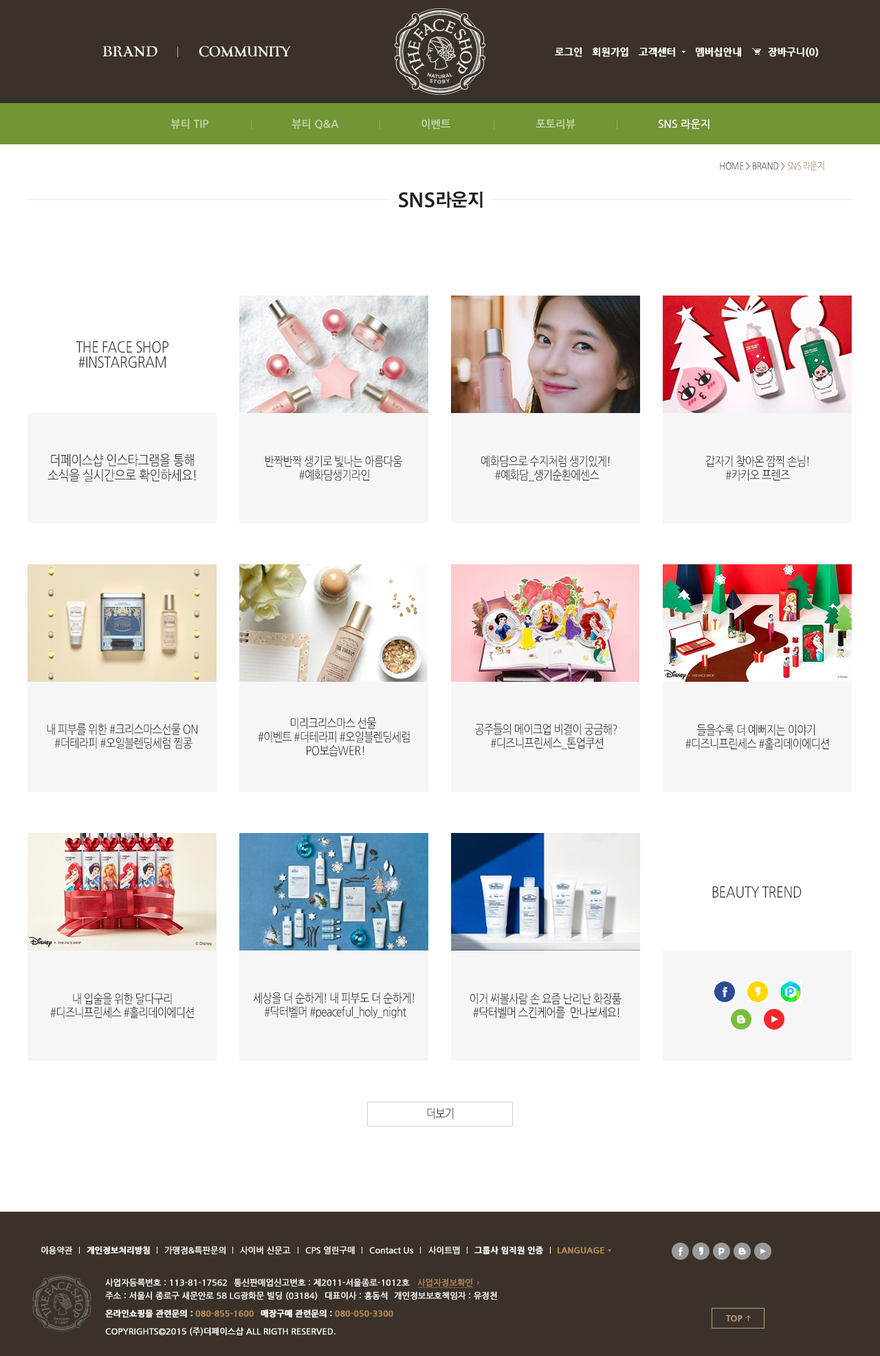
<style>
.page{position:relative;width:880px;height:1356px;background:#ffffff}
.page>*{position:absolute;margin:0}
.t1{font:9.6px "NanumGothicBold";color:#ffffff;font-weight:bold}
.t2{font:10.3px "NanumGothic";color:#cddbb1;font-weight:bold}
.t3{font:10.3px "NanumGothic";color:#ffffff;font-weight:bold}
.t4{font:9.6px "NanumGothic";letter-spacing:-0.03em;color:#333333;scale:0.85 1}
.t5{font:9.6px "NanumGothic";letter-spacing:-0.03em;color:#b68957;scale:0.85 1}
.t6{font:15.1px/15.1px "NanumGothic";letter-spacing:-0.03em;color:#333333;scale:0.85 1}
.t7{font:13.7px/15.1px "NanumGothic";letter-spacing:-0.03em;color:#333333;scale:0.85 1}
.t8{font:12.4px/13.7px "NanumGothic";letter-spacing:-0.03em;color:#333333;scale:0.85 1}
.t9{font:15.1px "NanumGothic";letter-spacing:-0.03em;color:#333333;scale:0.85 1}
.t10{font:12.4px "NanumGothic";letter-spacing:-0.03em;color:#333333;scale:0.85 1}
.t11{font:8.2px "NanumGothic";color:#ffffff;font-weight:bold}
.t12{font:8.2px "NanumGothicBold";color:#ffffff;font-weight:bold}
.t13{font:8.2px "NanumGothicBold";color:#b68957;font-weight:bold}
.t14{font:8.2px "NanumGothic";color:#b68957;font-weight:bold;text-decoration:underline}
</style>
<div class="page">
<p class="t1" style="left:555px;top:47px;width:27px;height:10px">로그인</p>
<p class="t1" style="left:592px;top:47px;width:36px;height:10px">회원가입</p>
<p class="t1" style="left:638px;top:47px;width:37px;height:10px">고객센터</p>
<p class="t1" style="left:695px;top:47px;width:46px;height:10px">멤버십안내</p>
<p class="t1" style="left:768px;top:47px;width:50px;height:10px">장바구니(0)</p>
<p class="t2" style="left:170px;top:119px;width:38px;height:10px">뷰티 TIP</p>
<p class="t2" style="left:291px;top:119px;width:48px;height:10px">뷰티 Q&amp;A</p>
<p class="t2" style="left:421px;top:119px;width:30px;height:10px">이벤트</p>
<p class="t2" style="left:535px;top:119px;width:40px;height:10px">포토리뷰</p>
<p class="t3" style="left:658px;top:119px;width:51px;height:10px">SNS 라운지</p>
<p class="t4" style="left:719px;top:161px;width:105px;height:9px">HOME &gt; BRAND &gt; <span class="t5">SNS 라운지</span></p>
<p class="t6" style="left:76px;top:341px;width:92px;height:27px;text-align:center">THE FACE SHOP<br>#INSTARGRAM</p>
<p class="t7" style="left:47px;top:454px;width:149px;height:28px;text-align:center">더페이스샵 인스타그램을 통해<br>소식을 실시간으로 확인하세요!</p>
<p class="t8" style="left:265px;top:456px;width:137px;height:25px;text-align:center">반짝반짝 생기로 빛나는 아름다움 <br>#예화담생기라인</p>
<p class="t8" style="left:481px;top:456px;width:128px;height:26px;text-align:center">예화담으로 수지처럼 생기있게!<br> #예화담_생기순환에센스</p>
<p class="t8" style="left:706px;top:456px;width:102px;height:25px;text-align:center">갑자기 찾아온 깜찍 손님!<br>#카카오 프렌즈</p>
<p class="t8" style="left:47px;top:723px;width:150px;height:26px;text-align:center">내 피부를 위한 #크리스마스선물 ON<br> #더테라피 #오일블렌딩세럼 찜콩</p>
<p class="t8" style="left:258px;top:717px;width:152px;height:40px;text-align:center">미리크리스마스 선물 <br>#이벤트 #더테라피 #오일블렌딩세럼<br> PO보습WER!</p>
<p class="t8" style="left:474px;top:724px;width:143px;height:26px;text-align:center">공주들의 메이크업 비결이 궁금해? <br>#디즈니프린세스_톤업쿠션</p>
<p class="t8" style="left:685px;top:724px;width:144px;height:26px;text-align:center">들을수록 더 예뻐지는 이야기<br> #디즈니프린세스 #홀리데이에디션</p>
<p class="t9" style="left:712px;top:886px;width:89px;height:12px">BEAUTY TREND</p>
<p class="t8" style="left:50px;top:992px;width:144px;height:26px;text-align:center">내 입술을 위한 달다구리<br>#디즈니프린세스 #홀리데이에디션</p>
<p class="t8" style="left:253px;top:992px;width:161px;height:26px;text-align:center">세상을 더 순하게! 내 피부도 더 순하게!<br> #닥터벨머 #peaceful_holy_night</p>
<p class="t8" style="left:470px;top:992px;width:151px;height:26px;text-align:center">이거 써볼사람 손 요즘 난리난 화장품 <br>#닥터벨머 스킨케어를  만나보세요!</p>
<p class="t10" style="left:427px;top:1108px;width:27px;height:11px">더보기</p>
<p class="t11" style="left:41px;top:1246px;width:32px;height:8px">이용약관</p>
<p class="t12" style="left:87px;top:1246px;width:63px;height:8px">개인정보처리방침</p>
<p class="t11" style="left:164px;top:1246px;width:61px;height:8px">가맹점&amp;특판문의</p>
<p class="t11" style="left:240px;top:1246px;width:51px;height:8px">사이버 신문고</p>
<p class="t11" style="left:305px;top:1246px;width:50px;height:8px">CPS 열린구매</p>
<p class="t11" style="left:369px;top:1246px;width:44px;height:7px">Contact Us</p>
<p class="t11" style="left:428px;top:1246px;width:32px;height:8px">사이트맵</p>
<p class="t12" style="left:474px;top:1246px;width:69px;height:8px">그룹사 임직원 인증</p>
<p class="t13" style="left:557px;top:1246px;width:47px;height:7px">LANGUAGE</p>
<p class="t11" style="left:105px;top:1278px;width:122px;height:8px">사업자등록번호 : 113-81-17562</p>
<p class="t11" style="left:234px;top:1278px;width:176px;height:8px">통신판매업신고번호 : 제2011-서울종로-1012호</p>
<p class="t14" style="left:417px;top:1278px;width:56px;height:10px">사업자정보확인</p>
<p class="t11" style="left:105px;top:1291px;width:212px;height:9px">주소 : 서울시 종로구 새문안로 58 LG광화문 빌딩 (03184)</p>
<p class="t11" style="left:325px;top:1291px;width:63px;height:8px">대표이사 : 홍동석</p>
<p class="t11" style="left:394px;top:1291px;width:103px;height:8px">개인정보보호책임자 : 유정천</p>
<p class="t12" style="left:105px;top:1309px;width:149px;height:8px">온라인쇼핑몰 관련문의 : <span class="t13">080-855-1600</span></p>
<p class="t13" style="left:260px;top:1309px;width:133px;height:8px"><span class="t12">매장구매 관련문의 : </span>080-050-3300</p>
<p class="t11" style="left:105px;top:1327px;width:230px;height:9px">COPYRIGHTS©2015 (주)더페이스샵 ALL RIGTH RESERVED.</p>
</div>
